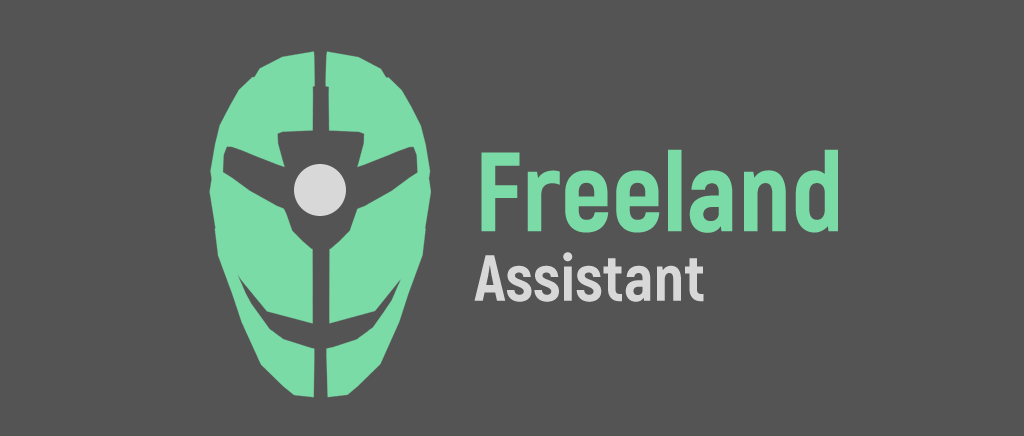
<style>
.page{position:relative;width:1024px;height:436px;background:#545454}
.page>*{position:absolute;margin:0}
.t1{font:112px "Akrobat-ExtraBold";color:#7bdba6}
.t2{font:64.8px "Akrobat-ExtraBold";color:#d8d8d8}
</style>
<div class="page">
<p class="t1" style="left:481px;top:149px;width:357px;height:84px">Freeland</p>
<p class="t2" style="left:474px;top:252px;width:230px;height:50px">Assistant</p>
</div>
